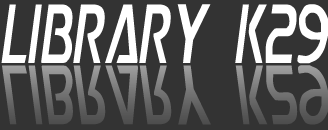
<style>
.page{position:relative;width:328px;height:130px;background:#333333}
.page>*{position:absolute;margin:0}
.t1{font:90px "SnailMailLDO";color:#ffffff;scale:0.59 1}
.t2{font:90.2px "SnailMailLDO";scale:0.59 1}
</style>
<div class="page">
<p class="t1" style="left:1px;top:4px;width:327px;height:60px">Library K29</p>
<p class="t2" style="left:2px;top:65px;width:327px;height:60px">Library K29</p>
</div>
